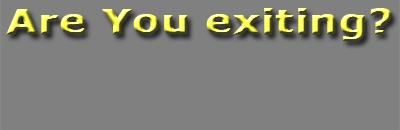
<style>
.page{position:relative;width:400px;height:130px;background:#818080}
.page>*{position:absolute;margin:0}
.t1{font:34px "Verdana-Bold";font-weight:bold;scale:1.18 1}
</style>
<div class="page">
<p class="t1" style="left:6px;top:8px;width:386px;height:34px">Are You exiting?</p>
</div>
